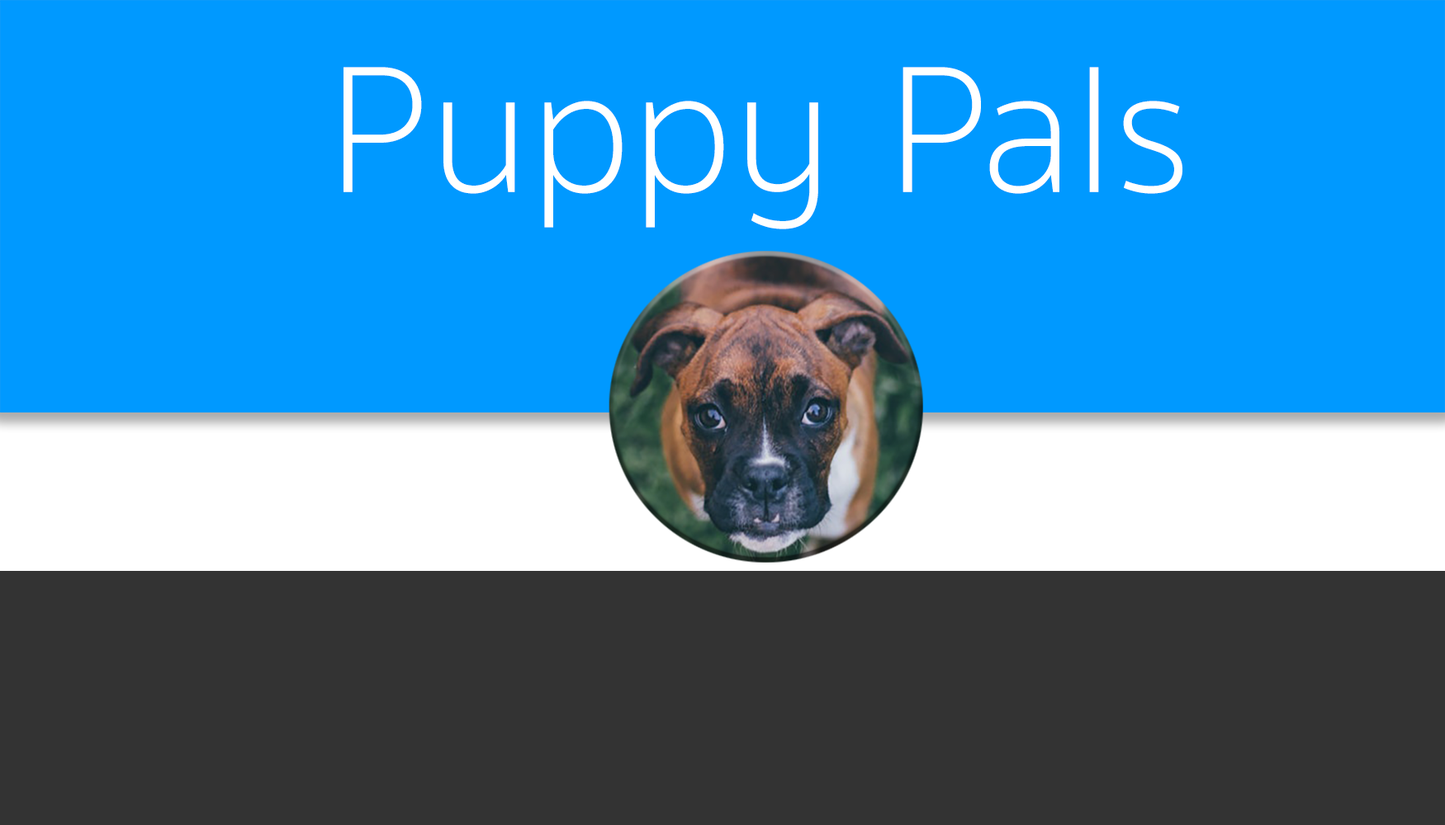
<style>
.page{position:relative;width:1445px;height:825px;background:#0099ff}
.page>*{position:absolute;margin:0}
.t1{font:184.8px "SukhumvitSet-Thin";color:#ffffff}
</style>
<div class="page">
<p class="t1" style="left:343px;top:67px;width:839px;height:162px">Puppy Pals</p>
</div>
